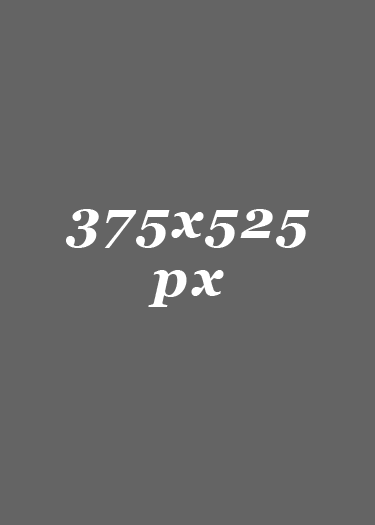
<style>
.page{position:relative;width:375px;height:525px;background:#646464}
.page>*{position:absolute;margin:0}
.t1{font:53px/58px "Georgia-BoldItalic";letter-spacing:0.06em;color:#ffffff}
</style>
<div class="page">
<p class="t1" style="left:66px;top:209px;width:244px;height:98px;text-align:center">375x525<br>px</p>
</div>
